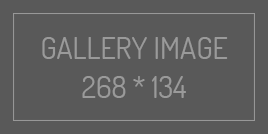
<style>
.page{position:relative;width:268px;height:134px;background:#595959}
.page>*{position:absolute;margin:0}
.t1{font:30px "Dosis-Regular";color:#9a9a9a;text-transform:uppercase}
.t2{font:30px "Dosis-Regular";color:#9a9a9a}
</style>
<div class="page">
<p class="t1" style="left:42px;top:37px;width:186px;height:22px">Gallery Image</p>
<p class="t2" style="left:82px;top:76px;width:104px;height:22px">134 * 268</p>
</div>
